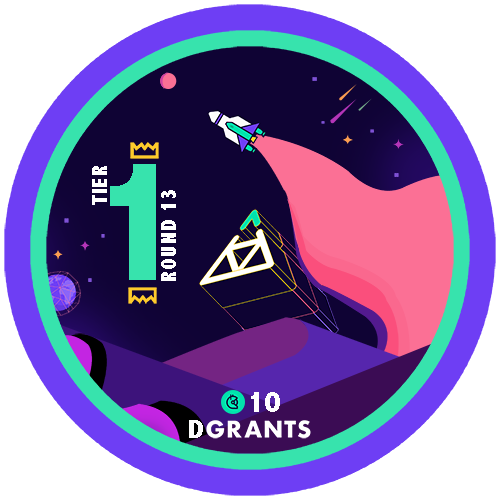
<style>
.page{position:relative;width:500px;height:500px;background:#ffffff}
.page>*{position:absolute;margin:0}
.t1{font:21.8px "AbadiMT-CondensedExtraBold";letter-spacing:0.05em;color:#ffffff}
.t2{font:178.3px "AbadiMT-CondensedExtraBold";letter-spacing:0.05em;color:#37e3ad}
.t3{font:30.9px "AbadiMT-CondensedExtraBold";letter-spacing:0.05em;color:#ffffff}
.t4{font:26.2px "AbadiMT-CondensedExtraBold";letter-spacing:0.05em;color:#fcfcfc;scale:1.2 1}
</style>
<div class="page">
<p class="t1" style="left:92px;top:166px;width:15px;height:39px;rotate:-90deg">TIER</p>
<p class="t2" style="left:110px;top:164px;width:46px;height:116px">1</p>
<p class="t1" style="left:161px;top:190px;width:15px;height:91px;rotate:-90deg">ROUND 13</p>
<p class="t3" style="left:251px;top:392px;width:29px;height:20px">10</p>
<p class="t4" style="left:189px;top:420px;width:14px;height:18px">D</p>
</div>
